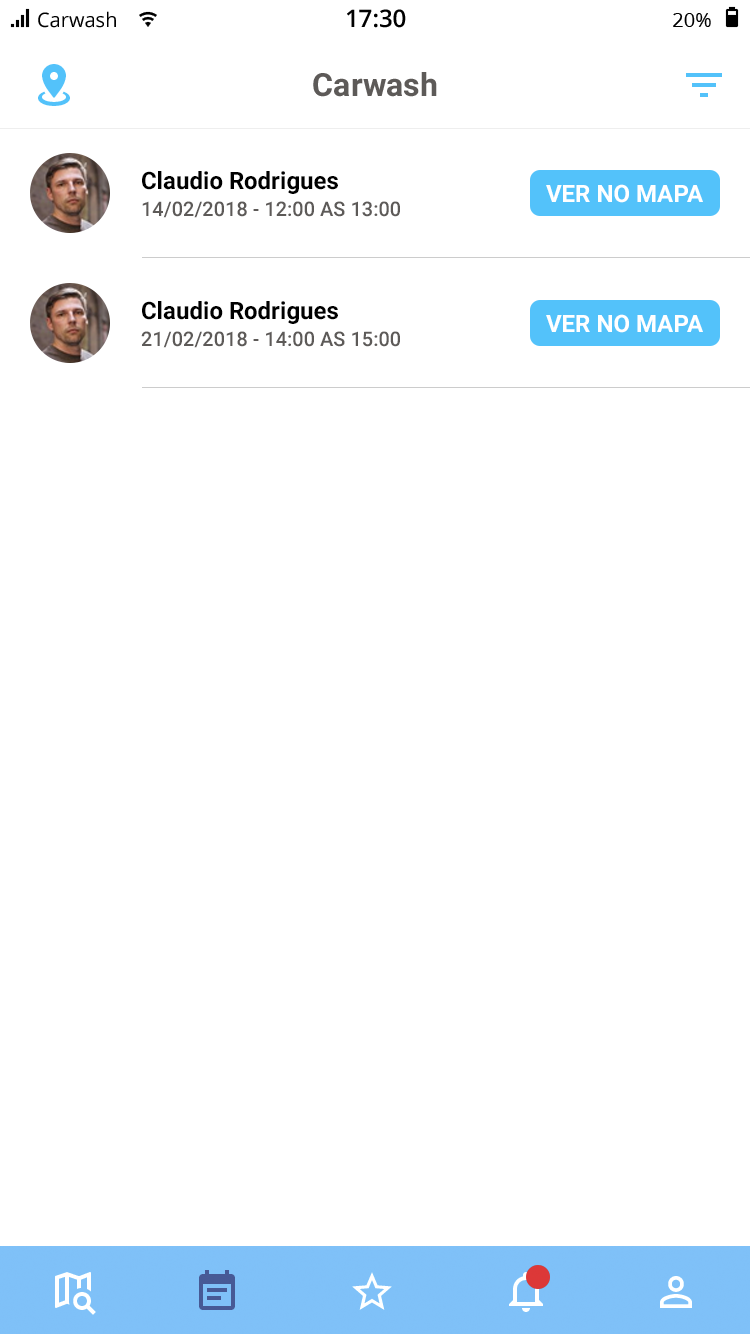
<style>
.page{position:relative;width:750px;height:1334px;background:#ffffff}
.page>*{position:absolute;margin:0}
.t1{font:24px "Roboto-Bold";color:#000000}
.t2{font:24px "Roboto-Bold";color:#ffffff}
.t3{font:20px "Roboto-Medium";color:#5d5a58;text-transform:uppercase}
</style>
<div class="page">
<p class="t1" style="left:142px;top:171px;width:196px;height:23px">Claudio Rodrigues</p>
<p class="t2" style="left:546px;top:184px;width:157px;height:19px">VER NO MAPA</p>
<p class="t3" style="left:142px;top:201px;width:258px;height:17px">14/02/2018 - 12:00 as 13:00</p>
<p class="t1" style="left:142px;top:301px;width:196px;height:23px">Claudio Rodrigues</p>
<p class="t2" style="left:546px;top:314px;width:157px;height:19px">VER NO MAPA</p>
<p class="t3" style="left:141px;top:331px;width:259px;height:17px">21/02/2018 - 14:00 as 15:00</p>
</div>
